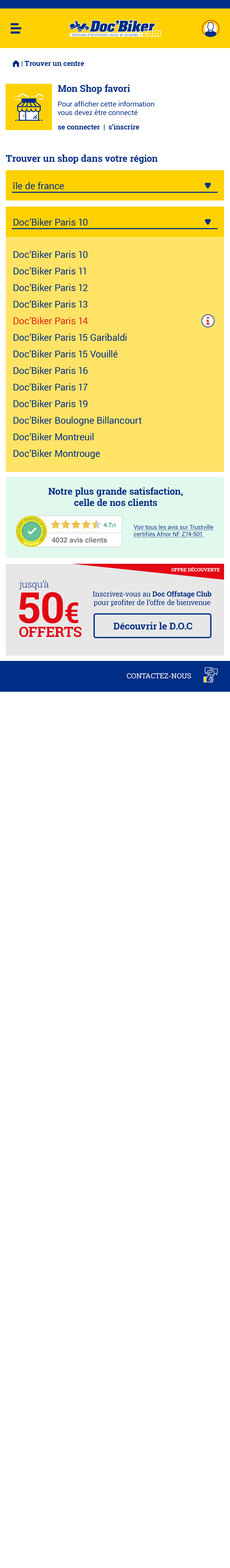
<style>
.page{position:relative;width:230px;height:1568px;background:#ffffff}
.page>*{position:absolute;margin:0}
.t1{font:7.1px "RobotoSlab-Bold";color:#002e86}
.t2{font:7.1px "FoundationIconsGeneral-Reg";color:#002e86}
.t3{font:9.5px "RobotoSlab-Bold";color:#002e86}
.t4{font:7.1px "Roboto-Regular";color:#002e86}
.t5{font:9.5px "Roboto-Regular";color:#002e86}
.t6{font:9.5px/16.6px "Roboto-Regular";color:#002e86}
.t7{font:9.5px/16.6px "Roboto-Regular";color:#e21e18}
.t8{font:5.9px "Roboto-Regular";color:#002e86;text-decoration:underline}
.t9{font:7.1px "Helvetica-Bold";color:#7a7a7a}
.t10{font:4.7px "RobotoSlab-Bold";color:#ffffff;text-transform:uppercase}
.t11{font:9.5px "RobotoSlab-Light";color:#002e86}
.t12{font:42.6px "RobotoSlab-Bold";color:#e30613}
.t13{font:28.4px "RobotoSlab-Bold";color:#e30613}
.t14{font:7.1px "RobotoSlab-Regular";color:#002e86}
.t15{font:14.2px "RobotoSlab-Bold";color:#e30613;text-transform:uppercase}
.t16{font:7.1px "RobotoSlab-Regular";color:#ffffff;text-transform:uppercase}
</style>
<div class="page">
<p class="t1" style="left:13px;top:60px;width:71px;height:7px"><span class="t2">m </span>| Trouver un centre</p>
<p class="t3" style="left:58px;top:84px;width:72px;height:10px">Mon Shop favori</p>
<p class="t4" style="left:57px;top:101px;width:97px;height:14px">Pour afficher cette information <br>vous devez être connecté</p>
<p class="t1" style="left:58px;top:124px;width:81px;height:7px">se connecter  |  s’inscrire</p>
<p class="t3" style="left:6px;top:155px;width:152px;height:9px">Trouver un shop dans votre région</p>
<p class="t5" style="left:13px;top:182px;width:51px;height:7px">île de france</p>
<p class="t5" style="left:14px;top:218px;width:73px;height:8px">Doc’Biker Paris 10</p>
<p class="t6" style="left:14px;top:251px;width:127px;height:208px">Doc’Biker Paris 10<br>Doc’Biker Paris 11<br>Doc’Biker Paris 12<br>Doc’Biker Paris 13<br><span class="t7">Doc’Biker Paris 14<br></span>Doc’Biker Paris 15 Garibaldi<br>Doc’Biker Paris 15 Vouillé<br>Doc’Biker Paris 16<br>Doc’Biker Paris 17<br>Doc’Biker Paris 19<br>Doc’Biker Boulogne Billancourt<br>Doc’Biker Montreuil<br>Doc’Biker Montrouge</p>
<p class="t3" style="left:48px;top:487px;width:134px;height:19px;text-align:center">Notre plus grande satisfaction,<br>celle de nos clients</p>
<p class="t8" style="left:133px;top:524px;width:80px;height:13px">Voir tous les avis sur Trustville<br>certifiés Afnor NF Z74-501</p>
<p class="t9" style="left:52px;top:537px;width:55px;height:6px">4032 avis clients</p>
<p class="t10" style="left:171px;top:567px;width:48px;height:5px">Offre découverte</p>
<p class="t11" style="left:19px;top:580px;width:29px;height:10px">jusqu’à</p>
<p class="t12" style="left:19px;top:592px;width:59px;height:32px">50<span class="t13">€</span></p>
<p class="t14" style="left:93px;top:591px;width:118px;height:15px;text-align:center">Inscrivez-vous au <span class="t1">Doc Offstage Club<br></span>pour profiter de l’offre de bienvenue</p>
<p class="t15" style="left:19px;top:626px;width:62px;height:11px">offerts</p>
<p class="t3" style="left:113px;top:622px;width:79px;height:8px">Découvrir le D.O.C</p>
<p class="t16" style="left:127px;top:673px;width:64px;height:6px">contactez-nous</p>
</div>
